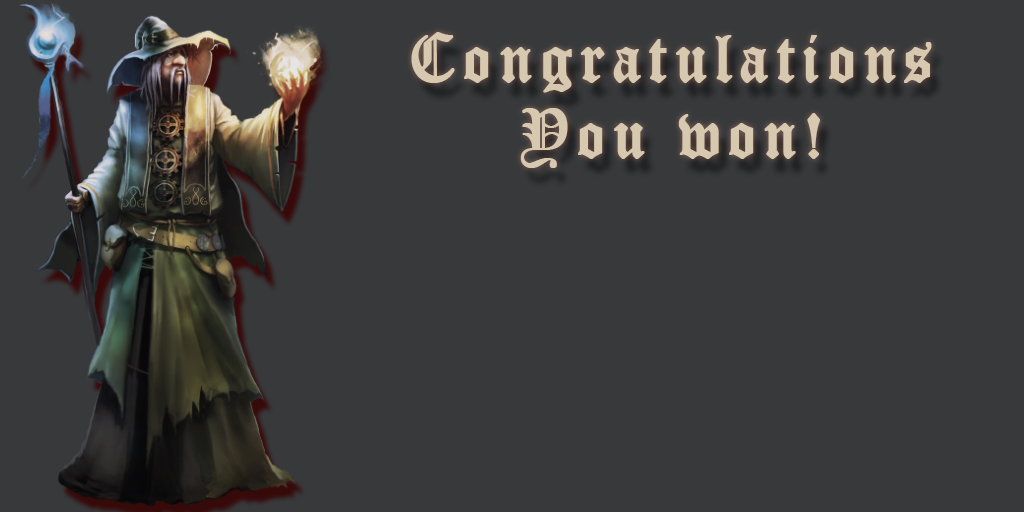
<style>
.page{position:relative;width:1024px;height:512px;background:#37393b}
.page>*{position:absolute;margin:0}
.t1{font:67.4px "OldEnglishTextMT";letter-spacing:0.1em;color:#d7c8b0;font-weight:bold;scale:0.93 1}
</style>
<div class="page">
<p class="t1" style="left:411px;top:32px;width:521px;height:136px;text-align:center">Congratulations<br>You won!</p>
</div>
